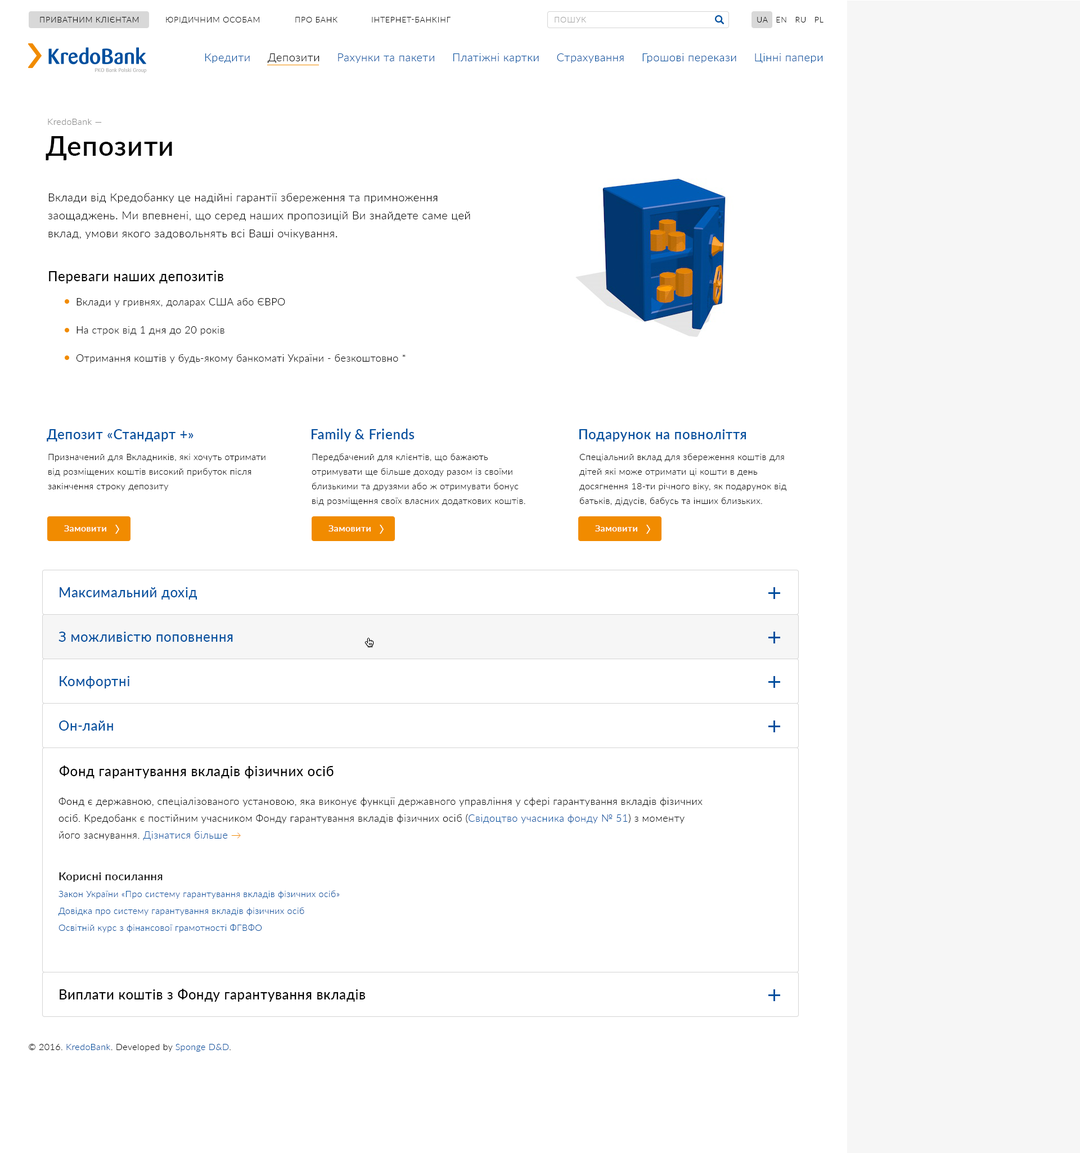
<style>
.page{position:relative;width:1080px;height:1153px;background:#ffffff}
.page>*{position:absolute;margin:0}
.t1{font:7.9px "Lato-Light";letter-spacing:0.06em;color:#000000;text-transform:uppercase}
.t2{font:7.9px "Lato-Light";letter-spacing:0.06em;color:#a3a3a3;text-transform:uppercase}
.t3{font:11.2px "Lato-Light";letter-spacing:0.03em;color:#004f9e}
.t4{font:11.2px "Lato-Light";letter-spacing:0.03em;color:#000000}
.t5{font:9px "Lato-Light";letter-spacing:0.03em;color:#8d8d8d}
.t6{font:27px "Lato-Semibold";letter-spacing:0.03em;color:#000000}
.t7{font:11.2px/18px "Lato-Light";letter-spacing:0.03em;color:#000000}
.t8{font:13.5px "Lato-Medium";letter-spacing:0.03em;color:#000000}
.t9{font:10.1px/28.1px "Lato-Light";letter-spacing:0.03em;color:#000000}
.t10{font:13.5px "Lato-Semibold";letter-spacing:0.03em;color:#004f9e}
.t11{font:9px/14.6px "Lato-Light";letter-spacing:0.03em;color:#000000}
.t12{font:9px "Lato-Semibold";letter-spacing:0.03em;color:#ffffff}
.t13{font:13.5px/44.4px "Lato-Medium";letter-spacing:0.03em;color:#004f9e}
.t14{font:13.5px/44.4px "Lato-Medium";letter-spacing:0.03em;color:#000000}
.t15{font:10.1px/16.9px "Lato-Light";letter-spacing:0.03em;color:#000000}
.t16{font:10.1px/16.9px "Lato-Light";letter-spacing:0.03em;color:#004f9e}
.t17{font:10.1px/16.9px "Lato-Light";letter-spacing:0.03em;color:#f18b00}
.t18{font:9px/16.9px "Lato-Light";letter-spacing:0.03em;color:#004f9e}
.t19{font:11.2px/16.9px "Lato-Medium";letter-spacing:0.03em;color:#000000}
.t20{font:9px "Lato-Light";letter-spacing:0.03em;color:#000000}
.t21{font:9px "Lato-Light";letter-spacing:0.03em;color:#004f9e}
</style>
<div class="page">
<p class="t1" style="left:40px;top:17px;width:99px;height:5px">Приватним клієнтам</p>
<p class="t1" style="left:166px;top:17px;width:93px;height:7px">Юрiдичним особам</p>
<p class="t1" style="left:295px;top:17px;width:43px;height:5px">Про банк</p>
<p class="t1" style="left:372px;top:17px;width:79px;height:5px">Iнтернет-Банкiнг</p>
<p class="t2" style="left:555px;top:17px;width:31px;height:5px">Пошук</p>
<p class="t1" style="left:757px;top:17px;width:67px;height:5px">UA   EN   RU   PL</p>
<p class="t3" style="left:205px;top:53px;width:618px;height:10px">Кредити     <span class="t4">Депозити</span>     Рахунки та пакети     Платіжні картки     Страхування     Грошові перекази     Цінні папери</p>
<p class="t5" style="left:48px;top:119px;width:54px;height:6px">KredoBank —</p>
<p class="t6" style="left:46px;top:136px;width:126px;height:24px">Депозити</p>
<p class="t7" style="left:48px;top:193px;width:422px;height:46px">Вклади від Кредобанку це надійні гарантії збереження та примноження заощаджень. Ми впевнені, що серед наших пропозицій Ви знайдете саме цей вклад, умови якого задовольнять всі Ваші очікування.</p>
<p class="t8" style="left:49px;top:271px;width:174px;height:13px">Переваги наших депозитiв</p>
<p class="t9" style="left:76px;top:298px;width:330px;height:65px">Вклади у гривнях, доларах США або ЄВРО <br>На строк від 1 дня до 20 років<br>Отримання коштів у будь-якому банкоматі України - безкоштовно *</p>
<p class="t10" style="left:47px;top:429px;width:147px;height:13px">Депозит «Стандарт +»</p>
<p class="t10" style="left:312px;top:429px;width:103px;height:13px">Family &amp; Friends</p>
<p class="t10" style="left:579px;top:429px;width:167px;height:13px">Подарунок на повноліття</p>
<p class="t11" style="left:48px;top:454px;width:218px;height:37px">Призначений для Вкладників, які хочуть отримати від розміщених коштів високий прибуток після закінчення строку депозиту</p>
<p class="t11" style="left:312px;top:453px;width:213px;height:53px">Передбачений для клієнтів, що бажають отримувати ще більше доходу разом із своїми близькими та друзями або ж отримувати бонус від розміщення своїх власних додаткових коштів.</p>
<p class="t11" style="left:579px;top:453px;width:207px;height:53px">Cпеціальний вклад для збереження коштів для дітей якi може отримати ці кошти в день досягнення 18-ти річного віку, як подарунок від батьків, дідусів, бабусь та інших близьких.</p>
<p class="t12" style="left:64px;top:525px;width:42px;height:7px">Замовити</p>
<p class="t12" style="left:328px;top:525px;width:43px;height:7px">Замовити</p>
<p class="t12" style="left:595px;top:525px;width:42px;height:7px">Замовити</p>
<p class="t13" style="left:58px;top:587px;width:275px;height:190px">Максимальний дохід<br>З можливістю поповнення<br>Комфортні<br>Он-лайн<br><span class="t14">Фонд гарантування вкладів фізичних осіб</span></p>
<p class="t8" style="left:59px;top:766px;width:275px;height:12px">Фонд гарантування вкладів фізичних осіб</p>
<p class="t15" style="left:58px;top:797px;width:645px;height:43px">Фонд є державною, спеціалізованого установою, яка виконує функції державного управління у сфері гарантування вкладів фізичних осіб. Кредобанк є постійним учасником Фонду гарантування вкладів фізичних осіб (<span class="t16">Свідоцтво учасника фонду № 51</span>) з моменту його заснування. <span class="t16">Дiзнатися бiльше </span><span class="t17">→</span></p>
<p class="t18" style="left:58px;top:872px;width:282px;height:61px"><span class="t19">Кориснi посилання<br></span>Закон України «Про систему гарантування вкладів фізичних осіб»<br>Довідка про систему гарантування вкладів фізичних осіб<br>Освітній курс з фінансової грамотності ФГВФО</p>
<p class="t8" style="left:60px;top:989px;width:305px;height:13px">Виплати коштів з Фонду гарантування вкладів</p>
<p class="t20" style="left:29px;top:1044px;width:202px;height:8px">© 2016. <span class="t21">KredoBank</span>. Developed by <span class="t21">Sponge D&amp;D</span>.</p>
</div>
